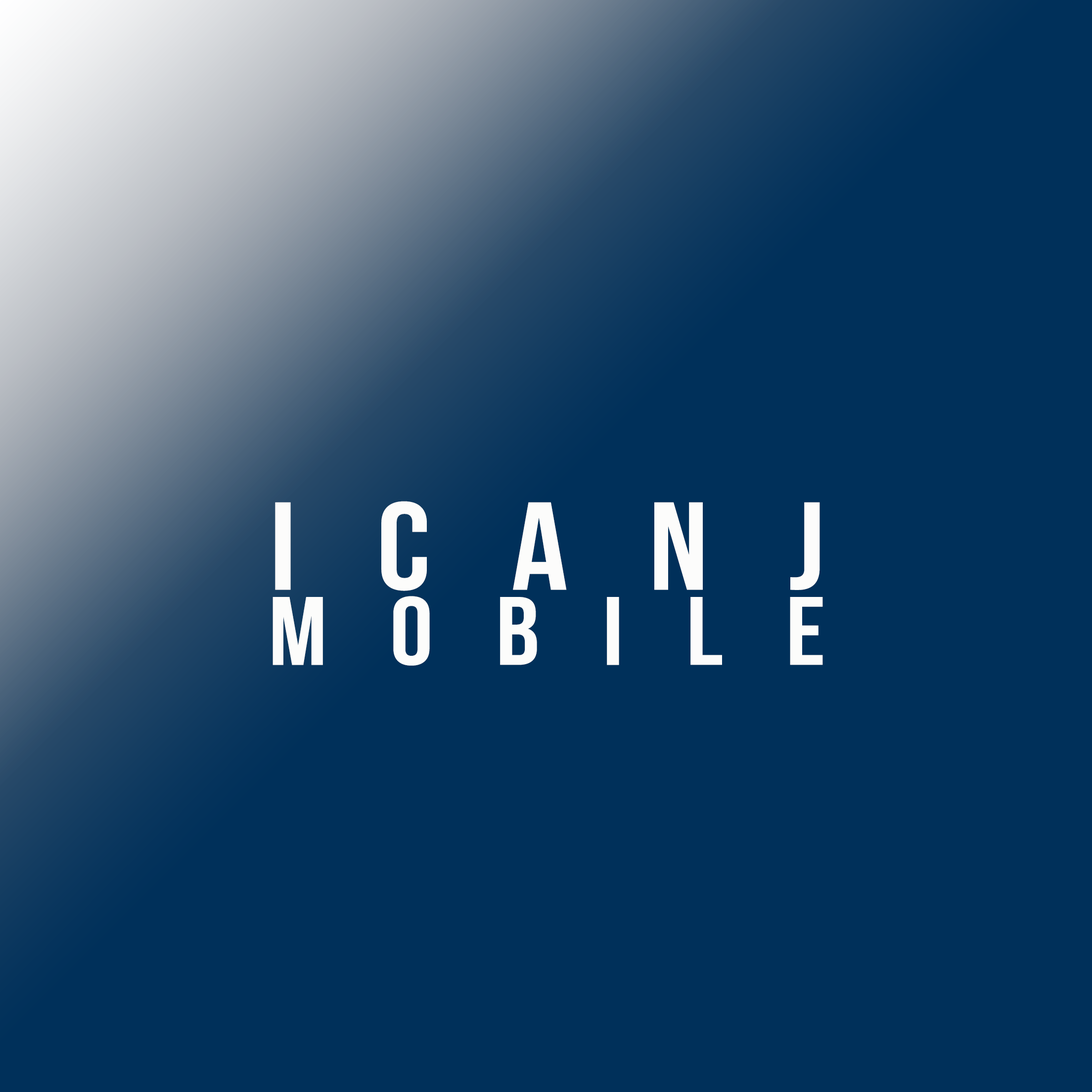
<style>
.page{position:relative;width:1092px;height:1092px;background:#00305a}
.page>*{position:absolute;margin:0}
.t1{font:97px/75.2px "BebasNeue";letter-spacing:0.585em;color:#fcfcfb;scale:1.11 1}
.t2{font:124.6px/75.2px "BebasNeue";letter-spacing:0.585em;color:#fcfcfb;scale:1.11 1}
</style>
<div class="page">
<p class="t1" style="left:273px;top:501px;width:550px;height:165px;text-align:center"><span class="t2">ICANJ<br></span>mobile</p>
</div>
